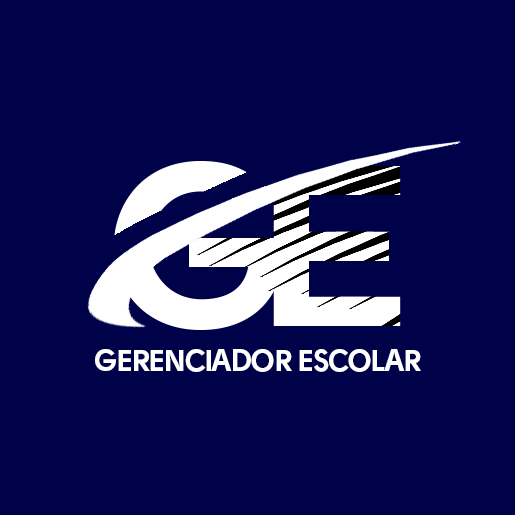
<style>
.page{position:relative;width:515px;height:515px;background:#000249}
.page>*{position:absolute;margin:0}
.t1{font:30px "Solomon-Sans-Bold";letter-spacing:-0.04em;color:#ffffff}
</style>
<div class="page">
<p class="t1" style="left:95px;top:349px;width:326px;height:23px">GERENCIADOR ESCOLAR</p>
</div>
